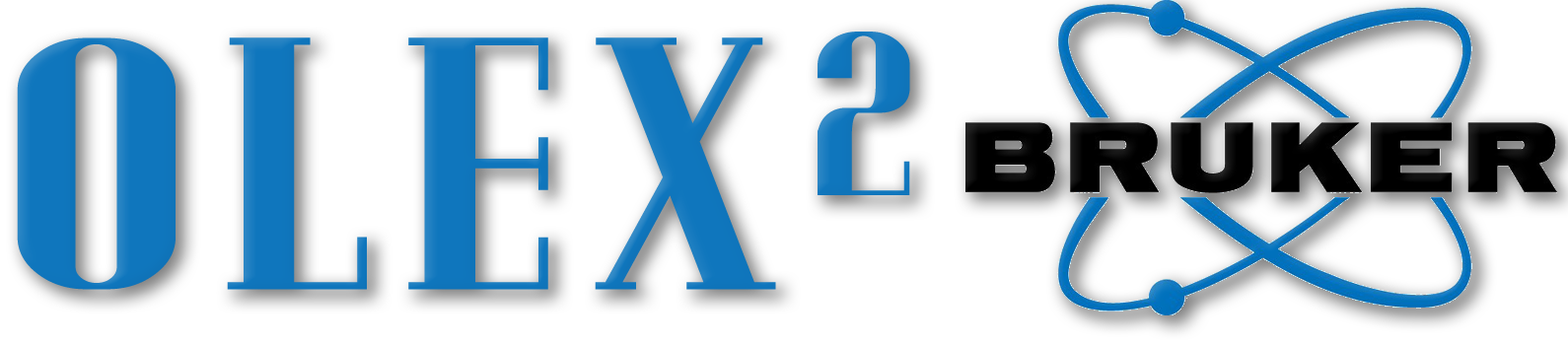
<style>
.page{position:relative;width:1568px;height:345px;background:#ffffff}
.page>*{position:absolute;margin:0}
.t1{font:314.1px "PotteryBarn";letter-spacing:0.05em;color:#0f76bd;scale:1.31 1}
.t2{font:350.4px "PotteryBarn";letter-spacing:0.05em;color:#0f76bd;scale:1.17 1}
</style>
<div class="page">
<p class="t1" style="left:17px;top:32px;width:893px;height:258px">OLEX<span class="t2">2</span></p>
</div>
